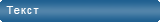
<style>
.page{position:relative;width:160px;height:22px}
.page>*{position:absolute;margin:0}
.t1{font:11px "ArialMT";letter-spacing:0.099em;color:#ffffff}
</style>
<div class="page">
<p class="t1" style="left:6px;top:6px;width:33px;height:8px">Текст</p>
</div>
